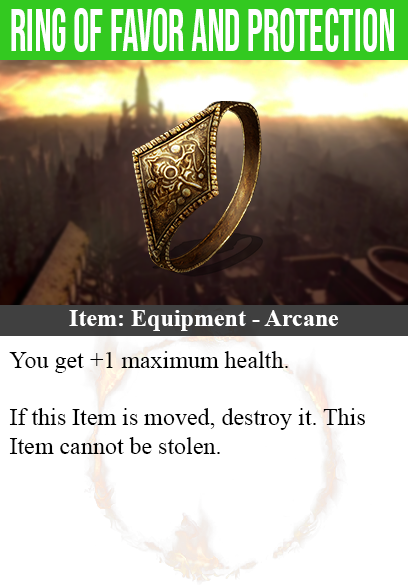
<style>
.page{position:relative;width:408px;height:585px;background:#ffffff}
.page>*{position:absolute;margin:0}
.t1{font:60px "BebasNeue-Regular";color:#ffffff;scale:0.67 1}
.t2{font:24px "TimesNewRomanPS-BoldMT";color:#ffffff}
.t3{font:24px "TimesNewRomanPSMT";color:#000000}
</style>
<div class="page">
<p class="t1" style="left:11px;top:8px;width:383px;height:44px">ring of favor and protection</p>
<p class="t2" style="left:69px;top:310px;width:269px;height:21px">Item: Equipment - Arcane</p>
<p class="t3" style="left:9px;top:351px;width:356px;height:103px">You get +1 maximum health.<br><br>If this Item is moved, destroy it. This<br>Item cannot be stolen.</p>
</div>
